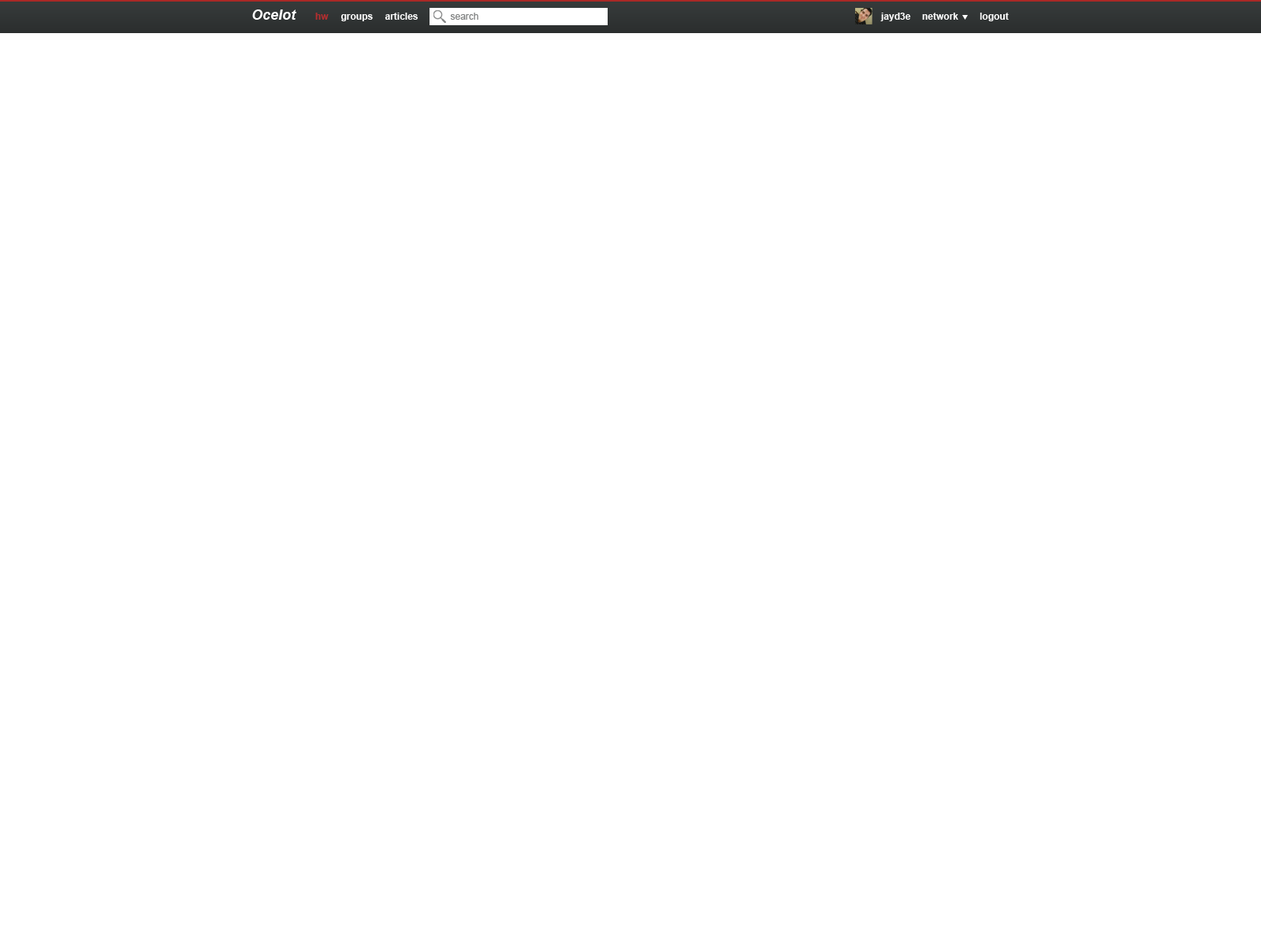
<style>
.page{position:relative;width:1261px;height:946px;background:#ffffff}
.page>*{position:absolute;margin:0}
.t1{font:14.2px "Arial-BoldItalicMT";color:#ffffff}
.t2{font:9.5px "Arial-BoldMT";color:#b22e2f}
.t3{font:9.5px "Arial-BoldMT";color:#ffffff}
.t4{font:9.5px "ArialMT";color:#808282}
</style>
<div class="page">
<p class="t1" style="left:252px;top:9px;width:44px;height:11px">Ocelot</p>
<p class="t2" style="left:315px;top:13px;width:14px;height:7px">hw</p>
<p class="t3" style="left:340px;top:14px;width:33px;height:7px">groups</p>
<p class="t3" style="left:385px;top:13px;width:33px;height:7px">articles</p>
<p class="t4" style="left:450px;top:13px;width:28px;height:7px">search</p>
<p class="t3" style="left:880px;top:13px;width:31px;height:8px">jayd3e</p>
<p class="t3" style="left:922px;top:13px;width:36px;height:7px">network</p>
<p class="t3" style="left:980px;top:13px;width:29px;height:8px">logout</p>
</div>
